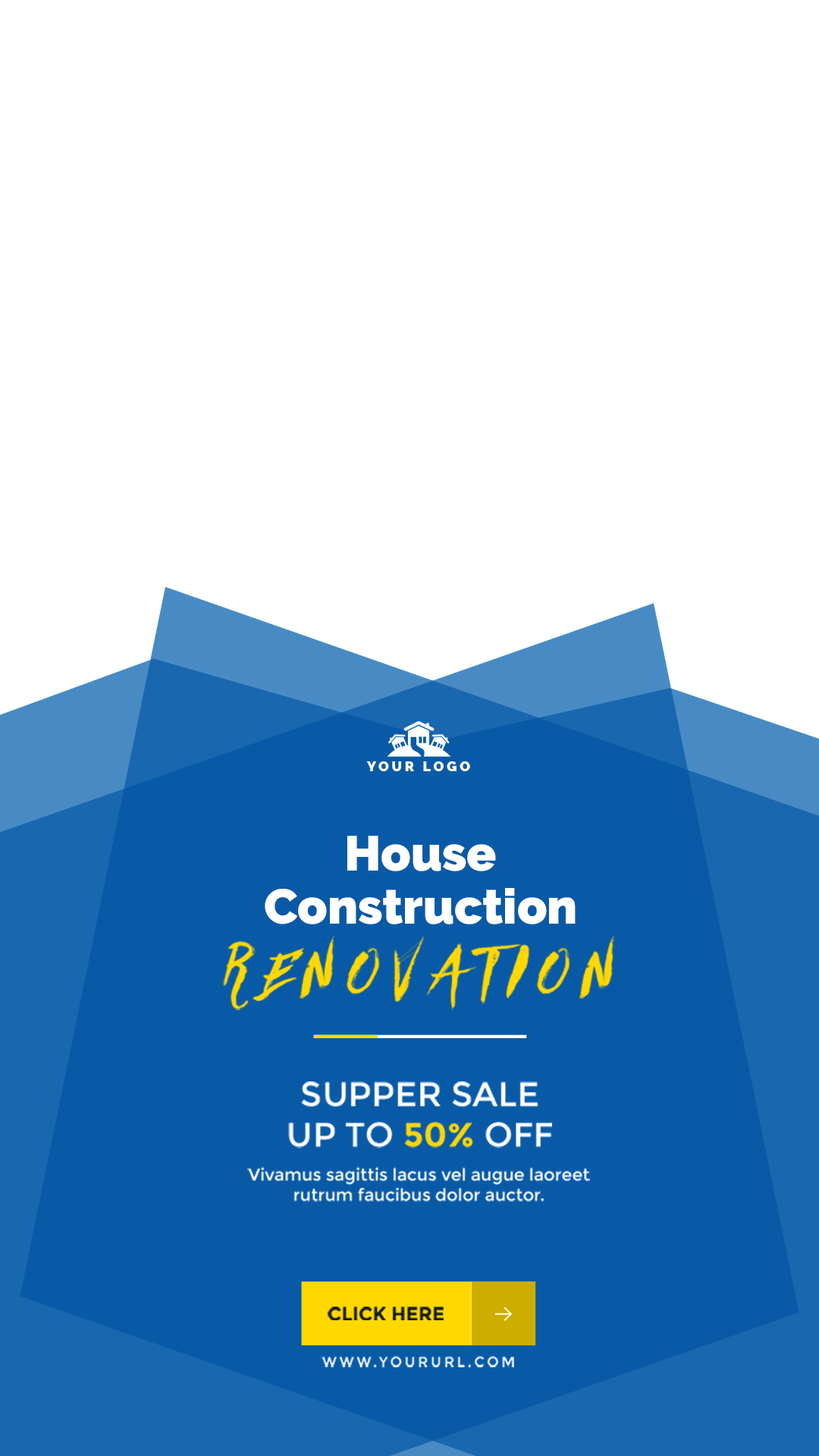
<style>
.page{position:relative;width:819px;height:1456px;background:#ffffff}
.page>*{position:absolute;margin:0}
.t1{font:13.8px "Raleway-Black";letter-spacing:0.2em;color:#ffffff;text-transform:uppercase}
.t2{font:48.9px/53.2px "Raleway-Black";color:#ffffff}
.t3{font:34px "Montserrat-Regular";color:#ffffff;text-transform:uppercase}
.t4{font:34px "Montserrat-Bold";color:#f9d50a;text-transform:uppercase}
.t5{font:17px "Montserrat-Regular";color:#ffffff}
.t6{font:19.1px "Montserrat-Bold";color:#161c1e;text-transform:uppercase}
.t7{font:13.8px "Montserrat-Regular";letter-spacing:0.2em;color:#ffffff;text-transform:uppercase}
</style>
<div class="page">
<p class="t1" style="left:366px;top:761px;width:104px;height:10px">your logo</p>
<p class="t2" style="left:265px;top:836px;width:311px;height:88px;text-align:center">House Construction</p>
<p class="t3" style="left:288px;top:1081px;width:264px;height:67px;text-align:center">supper sale<br>up to <span class="t4">50%</span> off</p>
<p class="t5" style="left:247px;top:1166px;width:343px;height:36px;text-align:center">Vivamus sagittis lacus vel augue laoreet rutrum faucibus dolor auctor.</p>
<p class="t6" style="left:328px;top:1307px;width:116px;height:13px">click here</p>
<p class="t7" style="left:321px;top:1356px;width:193px;height:11px">www.yoururl.com</p>
</div>
